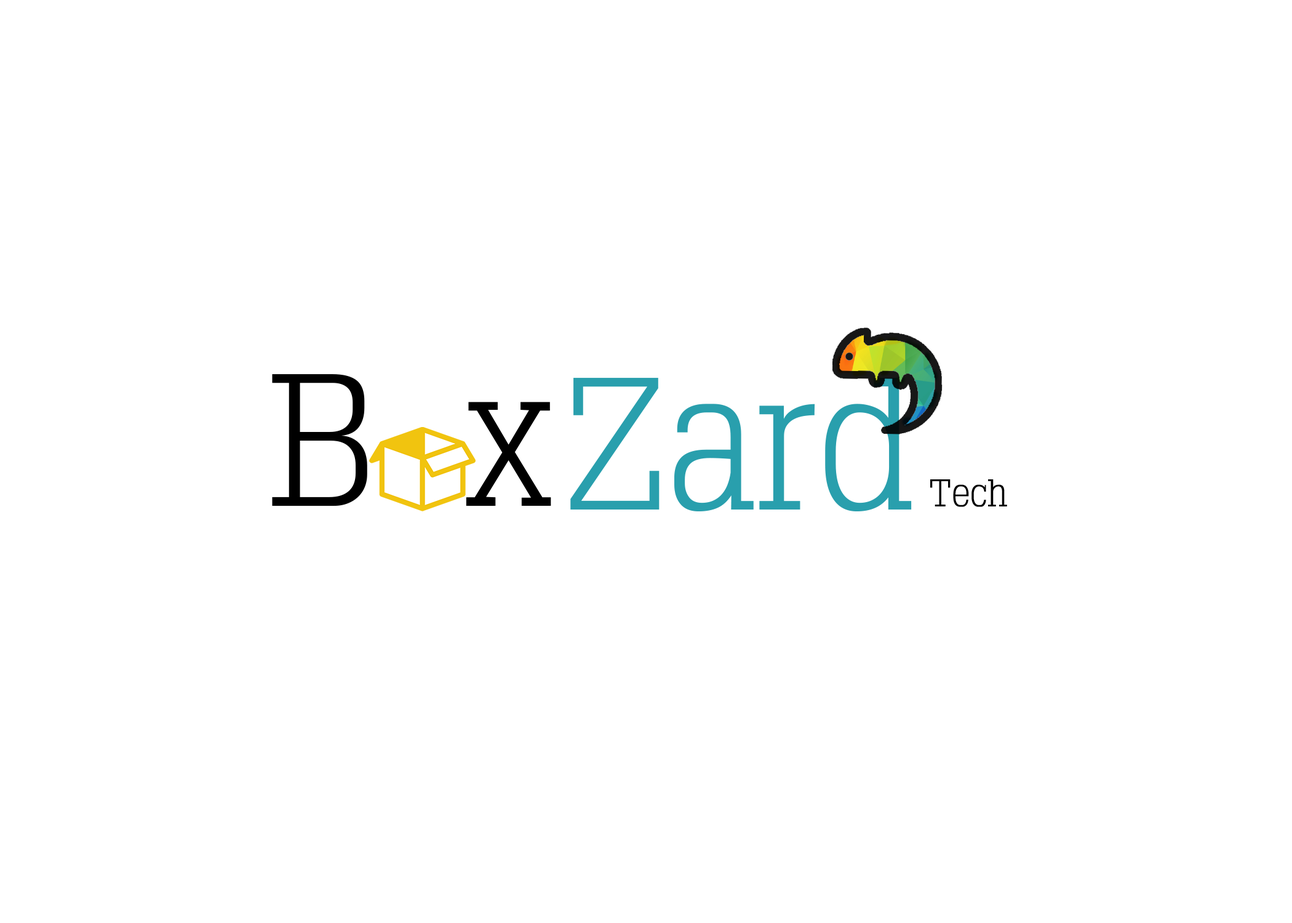
<style>
.page{position:relative;width:1292px;height:923px;background:#ffffff}
.page>*{position:absolute;margin:0}
.t1{font:184.6px "TypoSlabserif-Light";color:#299fad}
.t2{font:37.9px "TypoSlabserif-Light";color:#000000}
</style>
<div class="page">
<p class="t1" style="left:570px;top:378px;width:342px;height:133px">Zard</p>
<p class="t2" style="left:930px;top:479px;width:77px;height:28px">Tech</p>
</div>
